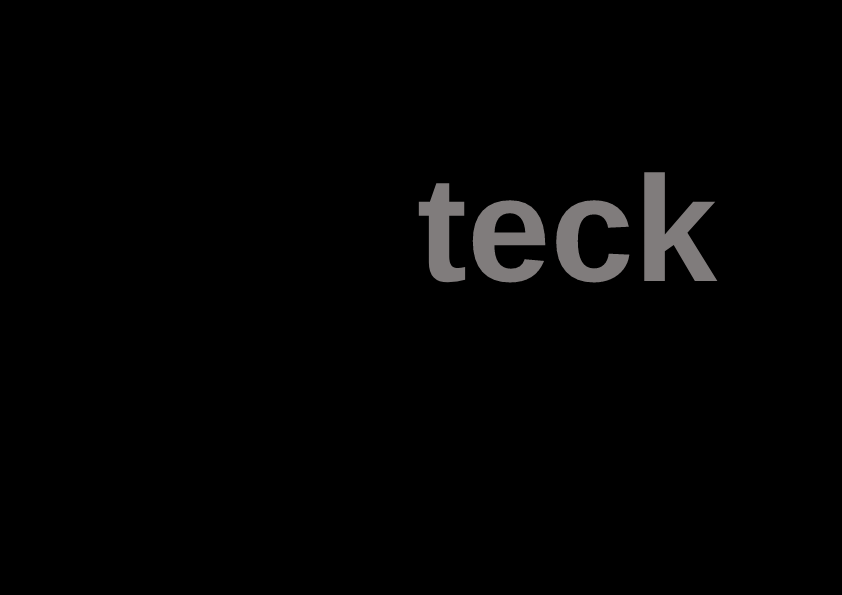
<style>
.page{position:relative;width:842px;height:595px;background:#000000}
.page>*{position:absolute;margin:0}
.t1{font:150px "Arimo-Bold";color:#807c7c}
</style>
<div class="page">
<p class="t1" style="left:418px;top:172px;width:300px;height:111px">teck</p>
</div>
